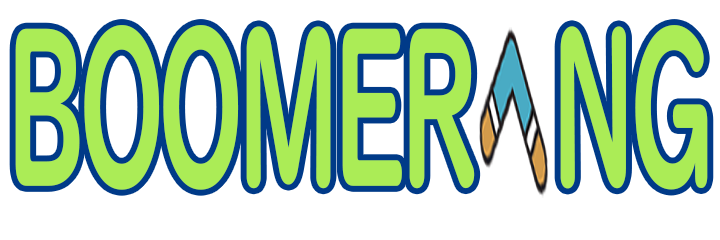
<style>
.page{position:relative;width:720px;height:240px;background:#ffffff}
.page>*{position:absolute;margin:0}
.t1{font:215px "UDDigiKyokashoNP-B";letter-spacing:-0.06em;color:#abec56;scale:0.5 1}
</style>
<div class="page">
<p class="t1" style="left:15px;top:25px;width:693px;height:165px">BOOMER   NG</p>
</div>
